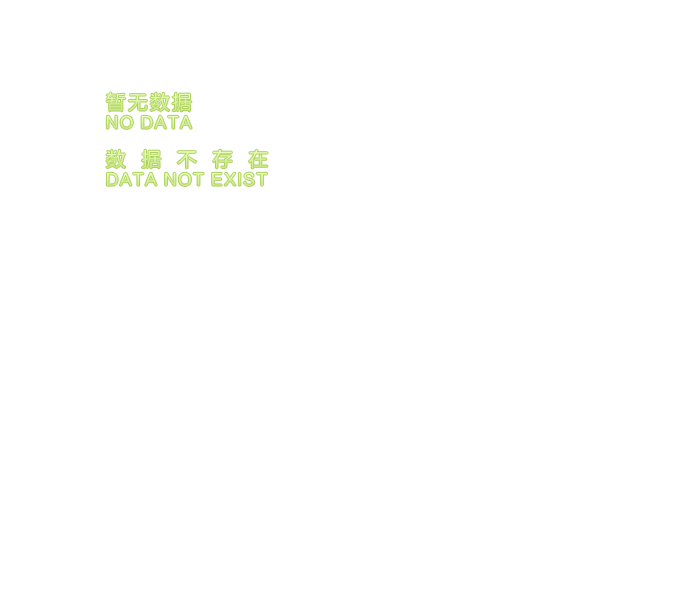
<style>
.page{position:relative;width:692px;height:601px;background:#ffffff}
.page>*{position:absolute;margin:0}
.t1{font:16px "FZLTHK--GBK1-0";letter-spacing:0.09em;color:#dff8aa}
.t2{font:20px "FZLTHK--GBK1-0";letter-spacing:0.78em}
.t3{font:16px "FZLTHK--GBK1-0";letter-spacing:0.09em;color:#e4fbb2}
</style>
<div class="page">
<p class="t1" style="left:106px;top:115px;width:86px;height:14px">NO DATA</p>
<p class="t2" style="left:106px;top:149px;width:162px;height:20px">数据不存在</p>
<p class="t3" style="left:106px;top:172px;width:162px;height:14px">DATA NOT EXIST</p>
</div>
